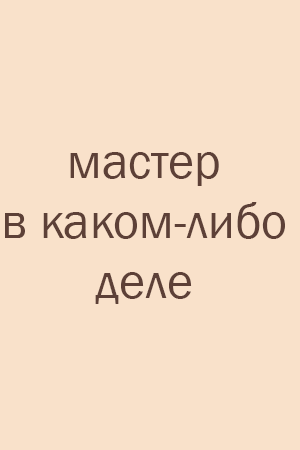
<style>
.page{position:relative;width:300px;height:450px;background:#f9e1ca}
.page>*{position:absolute;margin:0}
.t1{font:50px "FranklinGothic-Book";color:#5d4037}
</style>
<div class="page">
<p class="t1" style="left:5px;top:152px;width:280px;height:152px;text-align:center">мастер<br>в каком-либо<br>деле</p>
</div>
